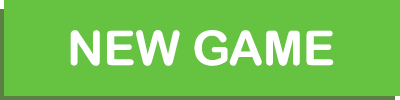
<style>
.page{position:relative;width:400px;height:100px;background:#66c241}
.page>*{position:absolute;margin:0}
.t1{font:47.8px "ArialRoundedMTBold";color:#ffffff;text-transform:uppercase}
</style>
<div class="page">
<p class="t1" style="left:70px;top:30px;width:264px;height:36px">New Game</p>
</div>
